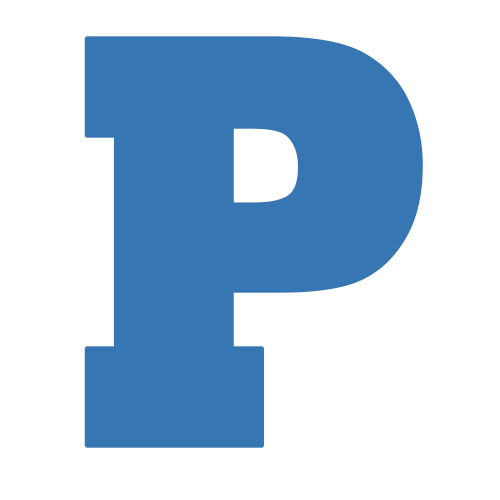
<style>
.page{position:relative;width:500px;height:500px;background:#ffffff}
.page>*{position:absolute;margin:0}
.t1{font:601.2px "Rockwell-ExtraBold";color:#3576b3;font-weight:bold;scale:0.74 1}
</style>
<div class="page">
<p class="t1" style="left:84px;top:36px;width:339px;height:412px">P</p>
</div>
